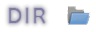
<style>
.page{position:relative;width:96px;height:32px;background:#ffffff}
.page>*{position:absolute;margin:0}
.t1{font:24px "ElyRounded-Heavy";letter-spacing:0.025em;color:#7f7d9d}
</style>
<div class="page">
<p class="t1" style="left:8px;top:7px;width:38px;height:17px">DIR</p>
</div>
